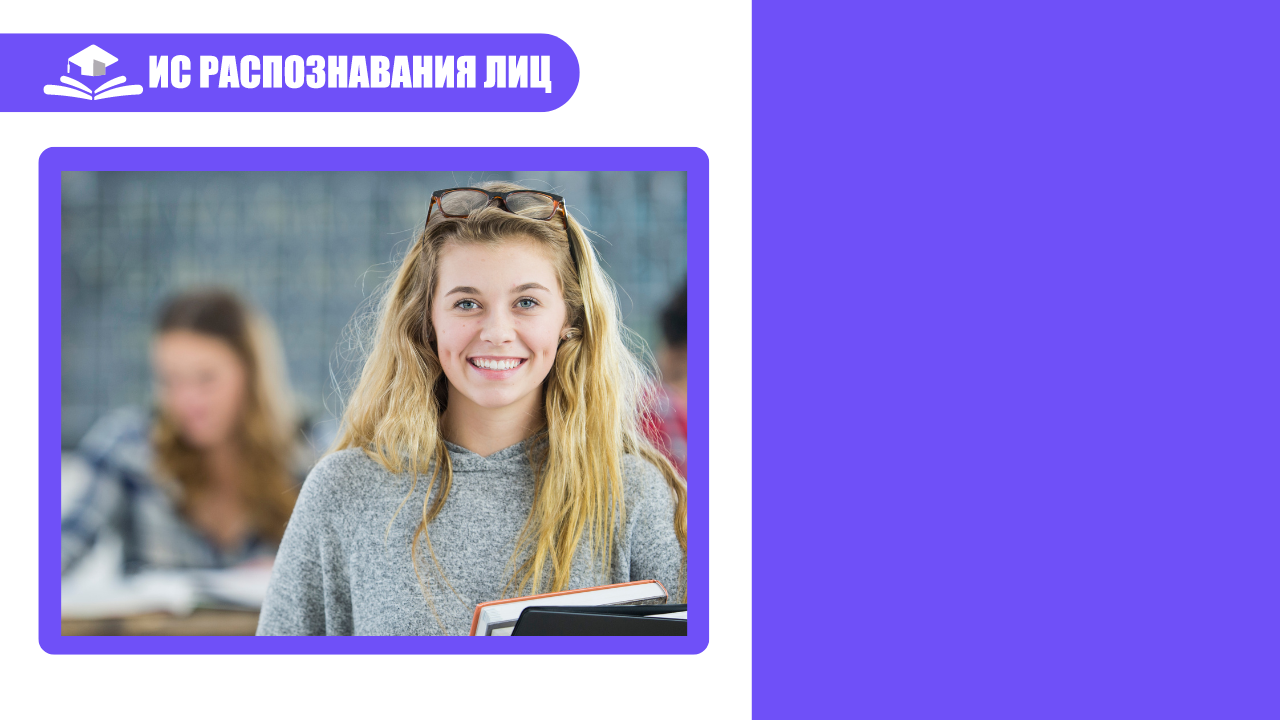
<style>
.page{position:relative;width:1280px;height:720px;background:#6f50f8}
.page>*{position:absolute;margin:0}
.t1{font:40px "Impact";color:#ffffff;text-transform:uppercase}
</style>
<div class="page">
<p class="t1" style="left:149px;top:55px;width:403px;height:38px">ИС распознавания лиц</p>
</div>
